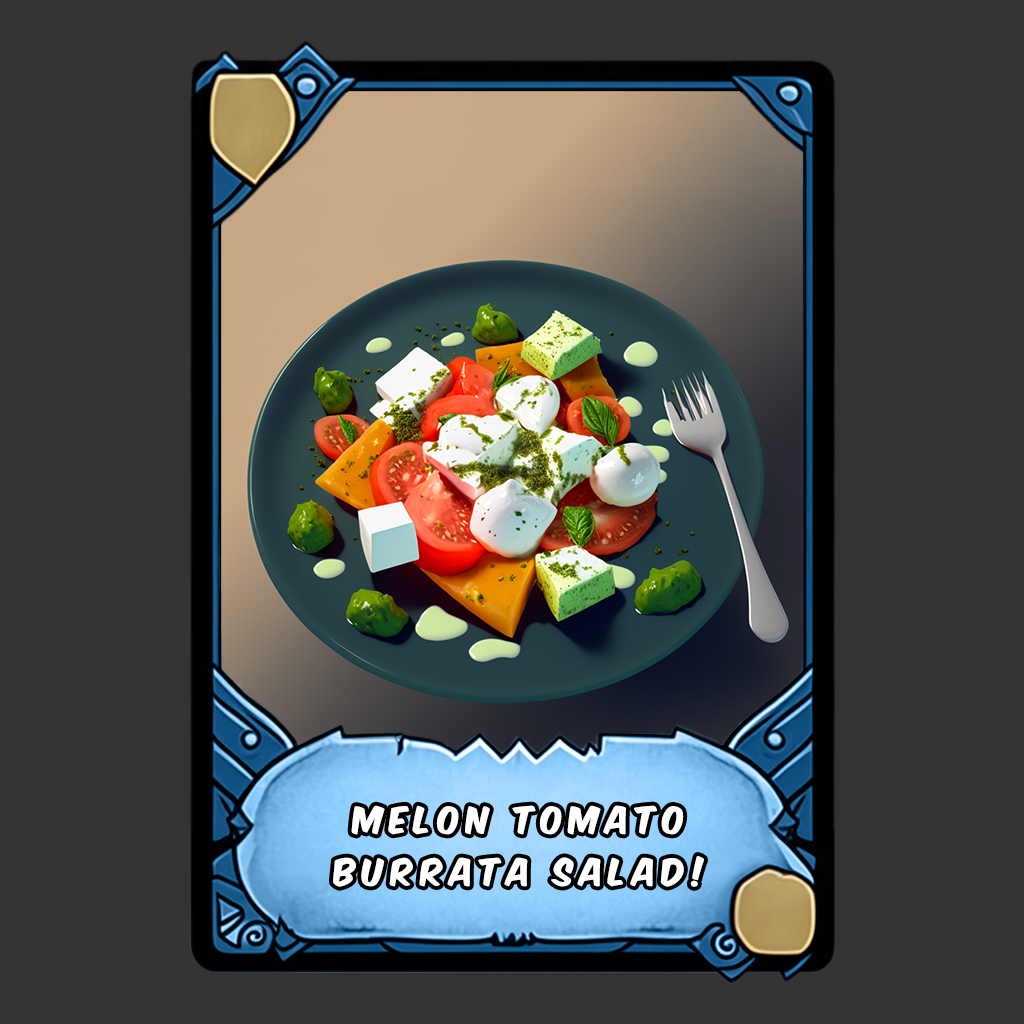
<style>
.page{position:relative;width:1024px;height:1024px;background:#333333}
.page>*{position:absolute;margin:0}
.t1{font:32px/52px "KomikaAxis";letter-spacing:0.2em;color:#ffffff}
</style>
<div class="page">
<p class="t1" style="left:333px;top:805px;width:371px;height:82px;text-align:center">Melon tomato<br>burrata Salad!</p>
</div>
